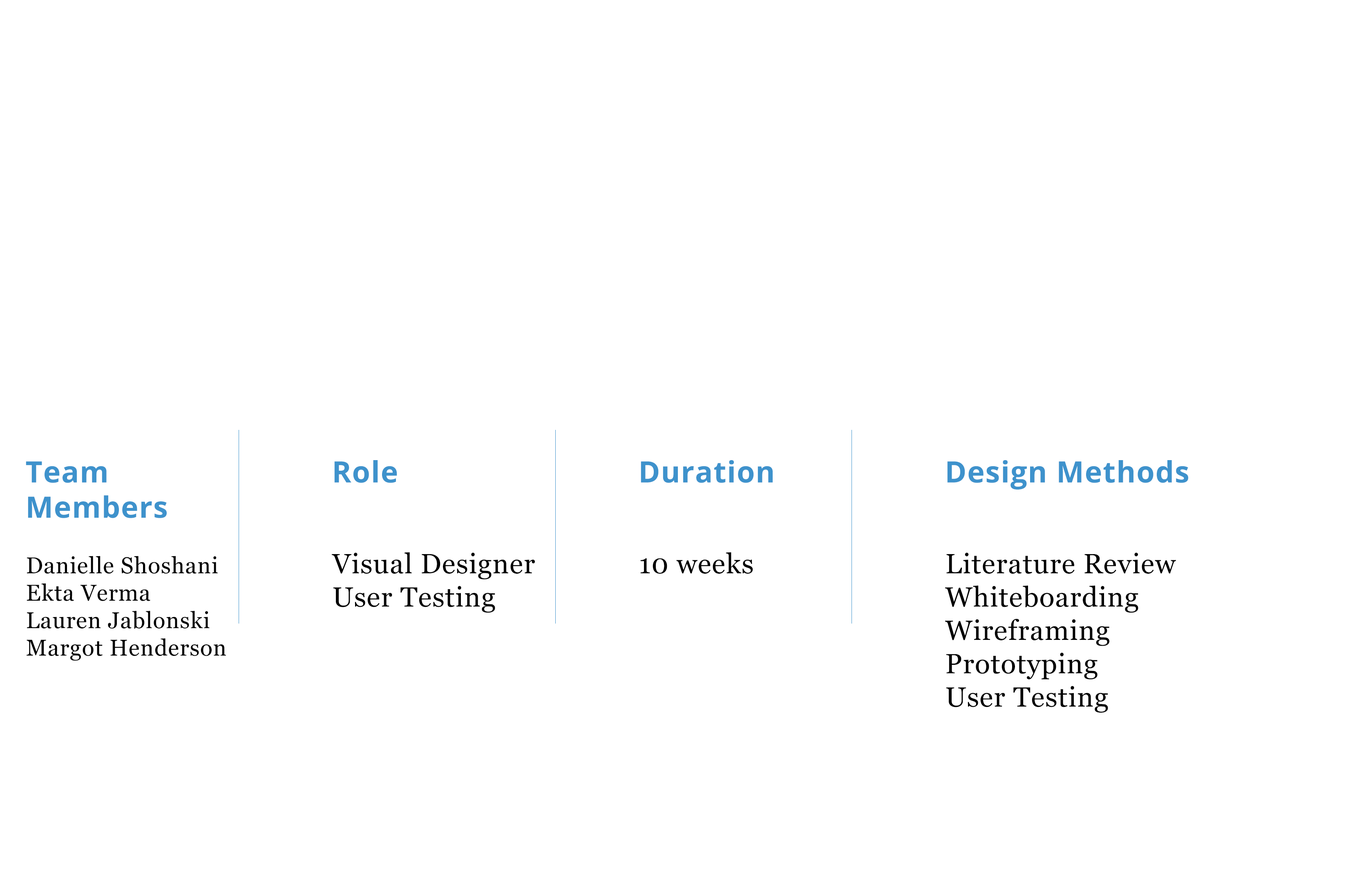
<style>
.page{position:relative;width:1368px;height:872px;background:#ffffff}
.page>*{position:absolute;margin:0}
.t1{font:29.4px "OpenSans-Bold";letter-spacing:0.025em;color:#3e92cc}
.t2{font:22.9px "Georgia";letter-spacing:0.025em;color:#000000}
.t3{font:27.8px "Georgia";letter-spacing:0.025em;color:#000000}
</style>
<div class="page">
<p class="t1" style="left:26px;top:461px;width:141px;height:57px">Team <br>Members</p>
<p class="t1" style="left:334px;top:460px;width:63px;height:23px">Role</p>
<p class="t1" style="left:641px;top:460px;width:132px;height:23px">Duration</p>
<p class="t1" style="left:947px;top:460px;width:241px;height:29px">Design Methods</p>
<p class="t2" style="left:27px;top:556px;width:199px;height:105px">Danielle Shoshani<br>Ekta Verma<br>Lauren Jablonski<br>Margot Henderson</p>
<p class="t3" style="left:332px;top:552px;width:203px;height:61px">Visual Designer<br>User Testing</p>
<p class="t3" style="left:640px;top:552px;width:113px;height:22px">10 weeks</p>
<p class="t3" style="left:945px;top:552px;width:231px;height:160px">Literature Review<br>Whiteboarding<br>Wireframing<br>Prototyping<br>User Testing</p>
</div>
